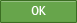
<style>
.page{position:relative;width:77px;height:23px;background:#67a54b}
.page>*{position:absolute;margin:0}
.t1{font:14px "LucidaConsole";color:#ffffff;scale:0.85 1}
</style>
<div class="page">
<p class="t1" style="left:31px;top:6px;width:15px;height:9px">OK</p>
</div>
